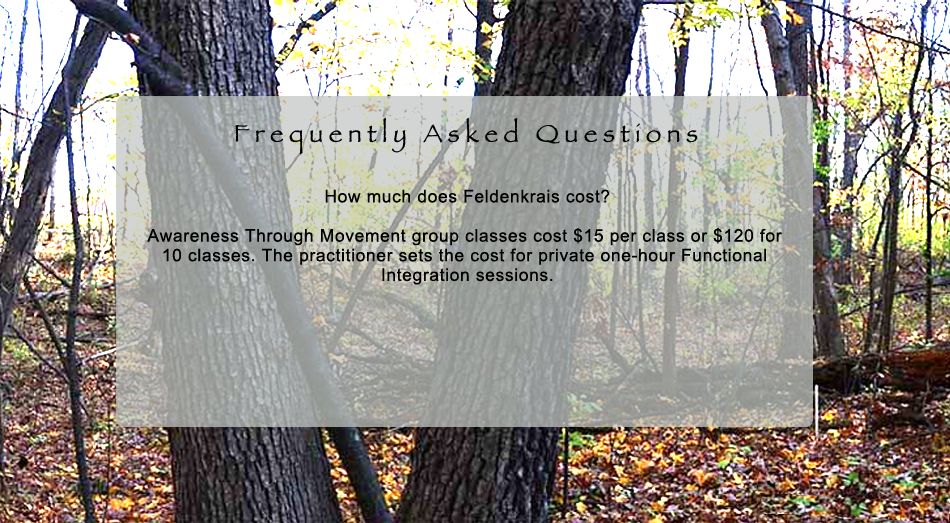
<style>
.page{position:relative;width:950px;height:523px}
.page>*{position:absolute;margin:0}
.t1{font:43.3px "Papyrus";letter-spacing:0.22em;color:#000000}
.t2{font:29.7px/19.6px "ArialMT";letter-spacing:0.04em;color:#000000}
</style>
<div class="page">
<p class="t1" style="left:235px;top:117px;width:463px;height:37px">Frequently Asked Questions</p>
<p class="t2" style="left:147px;top:189px;width:635px;height:96px;text-align:center">How much does Feldenkrais cost?<br><br>Awareness Through Movement group classes cost $15 per class or $120 for <br>10 classes. The practitioner sets the cost for private one-hour Functional <br>Integration sessions.</p>
</div>
